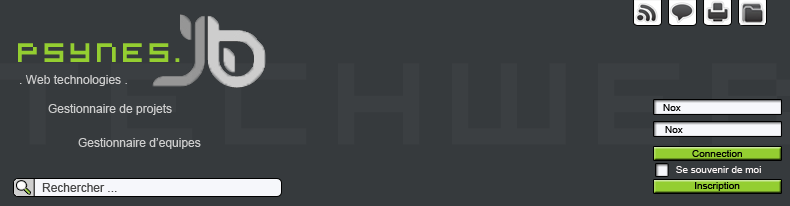
<style>
.page{position:relative;width:790px;height:206px;background:#363a3d}
.page>*{position:absolute;margin:0}
.t1{font:30px "VirtualDJ";color:#94ce31}
.t2{font:12px "ArialMT";color:#cdcdcd}
.t3{font:10px "ArialMT";color:#000000}
.t4{font:10px "ArialMT";color:#fcf6f6}
.t5{font:12px "ArialMT";color:#484848}
</style>
<div class="page">
<p class="t1" style="left:18px;top:43px;width:162px;height:19px">Psynes.</p>
<p class="t2" style="left:20px;top:75px;width:107px;height:11px">. Web technologies .</p>
<p class="t2" style="left:48px;top:104px;width:124px;height:11px">Gestionnaire de projets</p>
<p class="t3" style="left:663px;top:104px;width:18px;height:7px">Nox</p>
<p class="t3" style="left:665px;top:126px;width:18px;height:7px">Nox</p>
<p class="t2" style="left:78px;top:138px;width:123px;height:11px">Gestionnaire d’equipes</p>
<p class="t3" style="left:692px;top:150px;width:50px;height:7px">Connection</p>
<p class="t4" style="left:676px;top:166px;width:85px;height:7px">Se souvenir de moi</p>
<p class="t5" style="left:42px;top:183px;width:75px;height:9px">Rechercher ...</p>
<p class="t3" style="left:695px;top:182px;width:45px;height:9px">Inscription</p>
</div>
